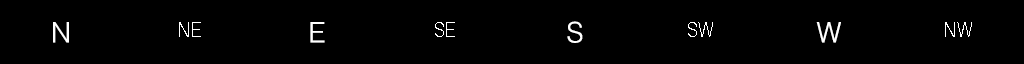
<style>
.page{position:relative;width:1024px;height:64px;background:#000000}
.page>*{position:absolute;margin:0}
.t1{font:27.8px "HelvLight-Normal";color:#ffffff}
.t2{font:20px "HelvLight-Normal";color:#ffffff;scale:0.89 1}
</style>
<div class="page">
<p class="t1" style="left:53px;top:22px;width:16px;height:21px">N</p>
<p class="t2" style="left:179px;top:22px;width:22px;height:15px">NE</p>
<p class="t1" style="left:310px;top:22px;width:15px;height:21px">E</p>
<p class="t2" style="left:435px;top:22px;width:20px;height:15px">SE</p>
<p class="t1" style="left:567px;top:21px;width:16px;height:22px">S</p>
<p class="t2" style="left:688px;top:22px;width:25px;height:15px">SW</p>
<p class="t1" style="left:816px;top:22px;width:25px;height:21px">W</p>
<p class="t2" style="left:945px;top:22px;width:27px;height:15px">NW</p>
</div>
